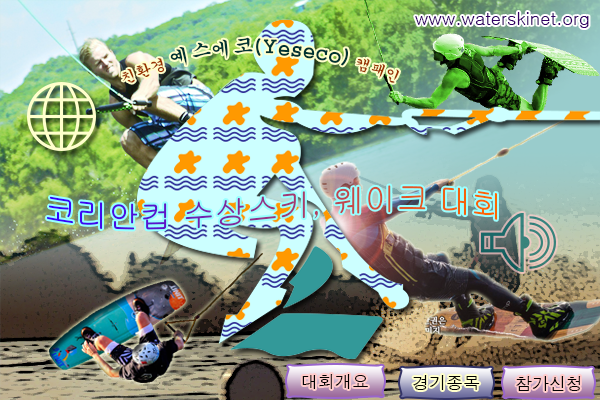
<style>
.page{position:relative;width:600px;height:400px}
.page>*{position:absolute;margin:0}
.t1{font:17.8px "Gulim";color:#330066}
.t2{font:19.6px "Gungsuh";color:#003333}
.t3{font:14.7px "Gungsuh";color:#993300}
.t4{font:31.7px "Gulim"}
.t5{font:16.9px "Dotum";color:#000000}
</style>
<div class="page">
<p class="t1" style="left:415px;top:12px;width:174px;height:16px">www.waterskinet.org</p>
<p class="t2" style="left:122px;top:37px;width:278px;height:46px"><span class="t3">친환경 </span>예스에코(Yeseco) <span class="t3">캠패인</span></p>
<p class="t4" style="left:47px;top:185px;width:450px;height:45px">코리안컵 수상스키, 웨이크 대회</p>
<p class="t5" style="left:302px;top:374px;width:66px;height:15px">대회개요</p>
<p class="t5" style="left:413px;top:375px;width:67px;height:15px">경기종목</p>
<p class="t5" style="left:516px;top:376px;width:65px;height:15px">참가신청</p>
</div>
